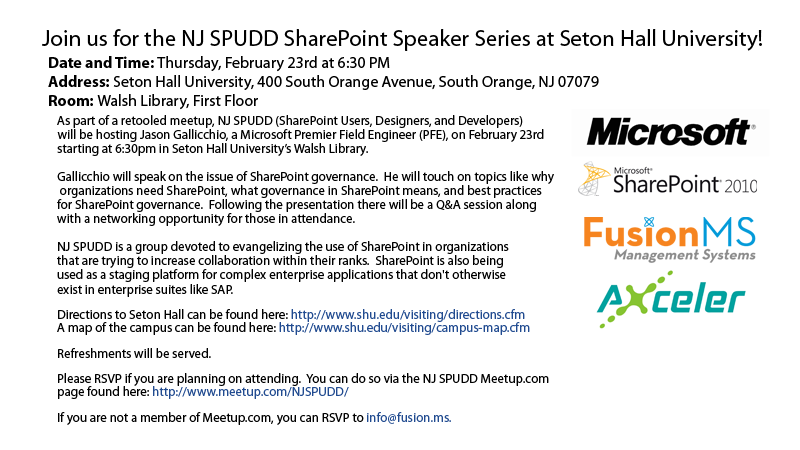
<style>
.page{position:relative;width:800px;height:450px;background:#ffffff}
.page>*{position:absolute;margin:0}
.t1{font:23px "MyriadPro-Regular";color:#000000}
.t2{font:16px "MyriadPro-Regular";color:#000000}
.t3{font:16px "MyriadPro-Bold";color:#000000}
.t4{font:13px "MyriadPro-Regular";color:#000000}
.t5{font:13px "MyriadPro-Regular";color:#214b90}
</style>
<div class="page">
<p class="t1" style="left:42px;top:29px;width:720px;height:22px">Join us for the NJ SPUDD SharePoint Speaker Series at Seton Hall University!</p>
<p class="t2" style="left:48px;top:56px;width:551px;height:54px"><span class="t3">Date and Time: </span>Thursday, February 23rd at 6:30 PM<br><span class="t3">Address: </span>Seton Hall University, 400 South Orange Avenue, South Orange, NJ 07079<br><span class="t3">Room: </span>Walsh Library, First Floor</p>
<p class="t4" style="left:57px;top:115px;width:497px;height:182px">As part of a retooled meetup, NJ SPUDD (SharePoint Users, Designers, and Developers) <br>will be hosting Jason Gallicchio, a Microsoft Premier Field Engineer (PFE), on February 23rd<br>starting at 6:30pm in Seton Hall University’s Walsh Library.<br><br>Gallicchio will speak on the issue of SharePoint governance.  He will touch on topics like why<br> organizations need SharePoint, what governance in SharePoint means, and best practices<br>for SharePoint governance.  Following the presentation there will be a Q&amp;A session along<br>with a networking opportunity for those in attendance.<br><br>NJ SPUDD is a group devoted to evangelizing the use of SharePoint in organizations <br>that are trying to increase collaboration within their ranks.  SharePoint is also being <br>used as a staging platform for complex enterprise applications that don't otherwise <br>exist in enterprise suites like SAP.</p>
<p class="t4" style="left:57px;top:309px;width:492px;height:116px">Directions to Seton Hall can be found here: <span class="t5">http://www.shu.edu/visiting/directions.cfm<br></span>A map of the campus can be found here: <span class="t5">http://www.shu.edu/visiting/campus-map.cfm<br></span><br>Refreshments will be served.<br><br>Please RSVP if you are planning on attending.  You can do so via the NJ SPUDD Meetup.com <br>page found here: <span class="t5">http://www.meetup.com/NJSPUDD/<br></span><br>If you are not a member of Meetup.com, you can RSVP to<span class="t5"> info@fusion.ms.</span></p>
</div>
